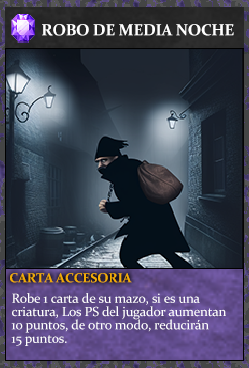
<style>
.page{position:relative;width:249px;height:368px}
.page>*{position:absolute;margin:0}
.t1{font:16px "Constantia-Bold";letter-spacing:-0.02em;color:#ffffff}
.t2{font:13.3px "Constantia-Bold";letter-spacing:-0.02em;color:#f2ac05}
.t3{font:13.3px/13.3px "Constantia";letter-spacing:-0.02em;color:#ffffff}
</style>
<div class="page">
<p class="t1" style="left:42px;top:24px;width:192px;height:12px">ROBO DE MEDIA NOCHE</p>
<p class="t2" style="left:10px;top:273px;width:122px;height:10px">CARTA ACCESORIA</p>
<p class="t3" style="left:11px;top:293px;width:215px;height:53px">Robe 1 carta de su mazo, si es una<br>criatura, Los PS del jugador aumentan <br>10 puntos, de otro modo, reducirán<br>15 puntos.</p>
</div>
